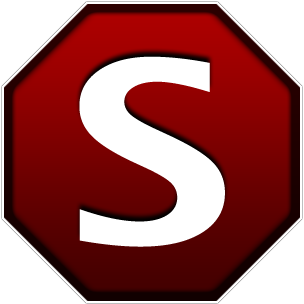
<style>
.page{position:relative;width:304px;height:304px;background:#ffffff}
.page>*{position:absolute;margin:0}
.t1{font:250px "LucidaGrande-Bold";letter-spacing:0.075em;color:#ffffff;scale:1.2 1}
</style>
<div class="page">
<p class="t1" style="left:79px;top:56px;width:146px;height:191px">S</p>
</div>
